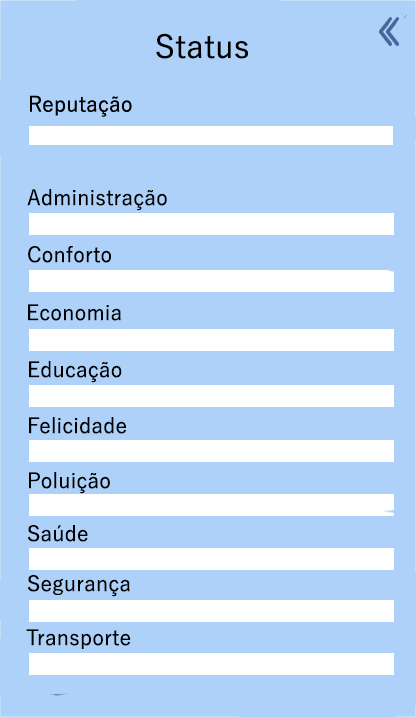
<style>
.page{position:relative;width:416px;height:717px;background:#add1f8}
.page>*{position:absolute;margin:0}
.t1{font:32px "YuGothic-Medium";color:#000000}
.t2{font:21.3px "YuGothic-Medium";color:#000000}
</style>
<div class="page">
<p class="t1" style="left:156px;top:33px;width:92px;height:26px">Status</p>
<p class="t2" style="left:27px;top:189px;width:140px;height:22px">Administração</p>
<p class="t2" style="left:28px;top:246px;width:83px;height:17px">Conforto</p>
<p class="t2" style="left:28px;top:304px;width:93px;height:17px">Economia</p>
<p class="t2" style="left:29px;top:361px;width:93px;height:22px">Educação</p>
<p class="t2" style="left:29px;top:417px;width:97px;height:17px">Felicidade</p>
<p class="t2" style="left:29px;top:472px;width:81px;height:22px">Poluição</p>
<p class="t2" style="left:27px;top:525px;width:61px;height:17px">Saúde</p>
<p class="t2" style="left:27px;top:575px;width:103px;height:22px">Segurança</p>
<p class="t2" style="left:26px;top:629px;width:105px;height:20px">Transporte</p>
</div>
